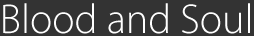
<style>
.page{position:relative;width:254px;height:36px;background:#333333}
.page>*{position:absolute;margin:0}
.t1{font:42px "MyriadPro-Light";color:#ffffff;text-decoration:underline}
</style>
<div class="page">
<p class="t1" style="left:3px;top:3px;width:247px;height:31px">Blood and Soul</p>
</div>
